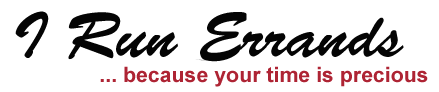
<style>
.page{position:relative;width:439px;height:92px;background:#ffffff}
.page>*{position:absolute;margin:0}
.t1{font:64px "BrushScriptStd";color:#040404}
.t2{font:21.3px "Arial-BoldMT";color:#ae2434}
</style>
<div class="page">
<p class="t1" style="left:15px;top:11px;width:389px;height:51px">I Run Errands</p>
<p class="t2" style="left:100px;top:66px;width:328px;height:21px">... because your time is precious</p>
</div>
